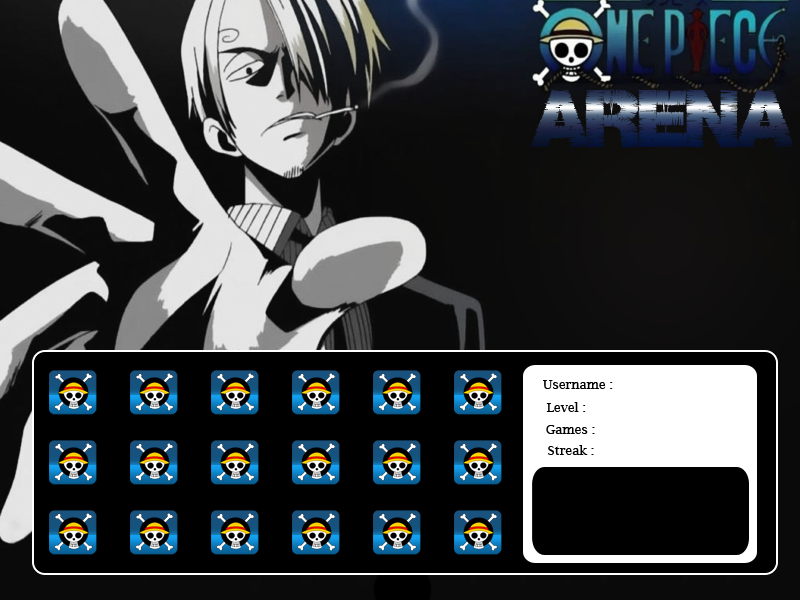
<style>
.page{position:relative;width:800px;height:600px}
.page>*{position:absolute;margin:0}
.t1{font:72px "Base05"}
.t2{font:12.9px "LucidaBright";color:#000000}
</style>
<div class="page">
<p class="t1" style="left:531px;top:89px;width:264px;height:71px">ARENA</p>
<p class="t2" style="left:543px;top:380px;width:70px;height:9px">Username :</p>
<p class="t2" style="left:546px;top:402px;width:40px;height:10px">Level :</p>
<p class="t2" style="left:546px;top:425px;width:49px;height:9px">Games :</p>
<p class="t2" style="left:548px;top:445px;width:46px;height:10px">Streak :</p>
</div>
